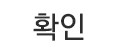
<style>
.page{position:relative;width:118px;height:54px;background:#ffffff}
.page>*{position:absolute;margin:0}
.t1{font:30px "KoPubDotumMedium";color:#2d2d2d;font-weight:bold}
</style>
<div class="page">
<p class="t1" style="left:33px;top:13px;width:51px;height:28px">확인</p>
</div>
